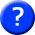
<style>
.page{position:relative;width:35px;height:35px;background:#003afe}
.page>*{position:absolute;margin:0}
.t1{font:23.8px "Verdana";color:#ffffff;font-weight:bold}
</style>
<div class="page">
<p class="t1" style="left:12px;top:7px;width:12px;height:19px">?</p>
</div>
